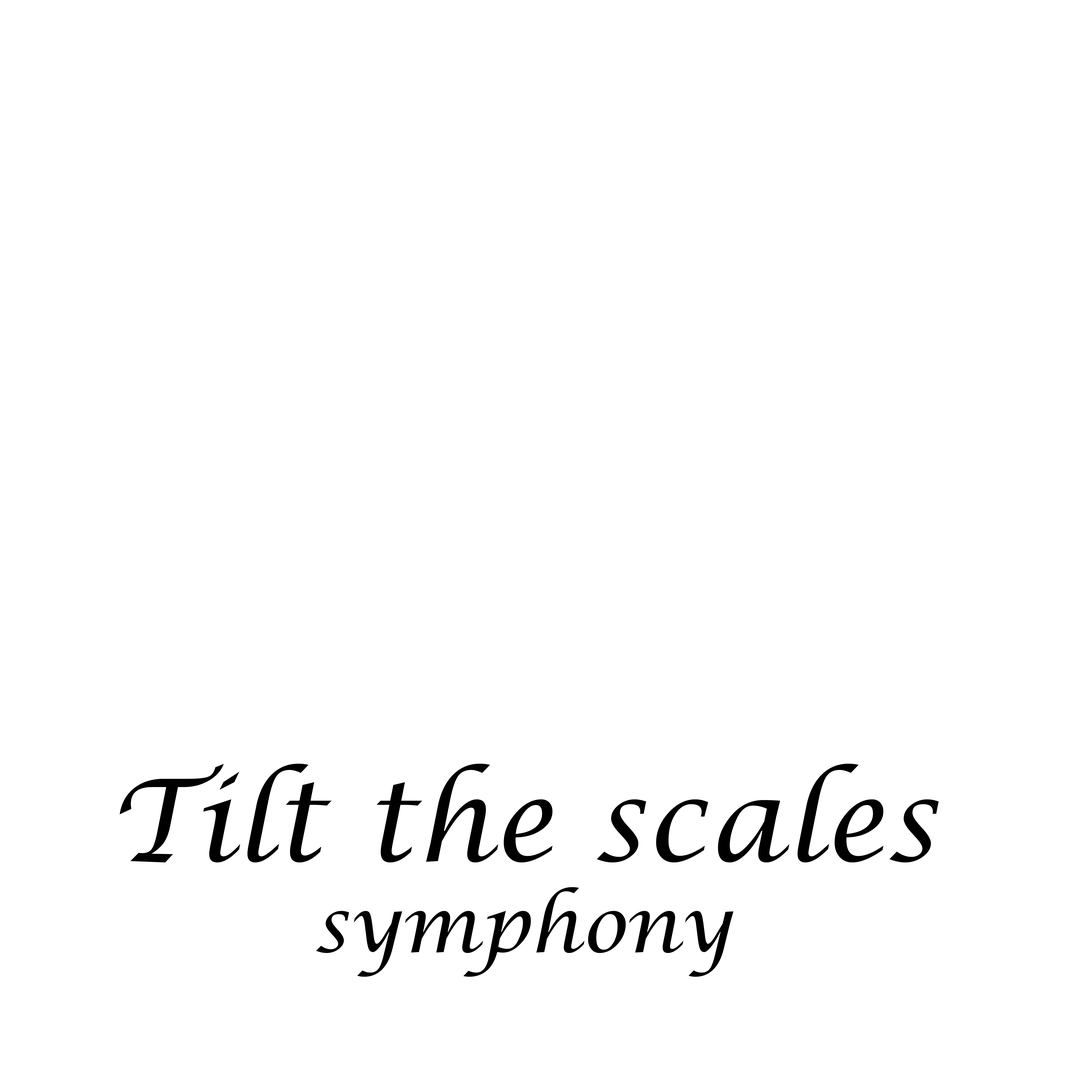
<style>
.page{position:relative;width:1092px;height:1092px;background:#ffffff}
.page>*{position:absolute;margin:0}
.t1{font:113.7px "LucidaCalligraphy-Italic";letter-spacing:0.005em;color:#000000}
.t2{font:75.8px "LucidaCalligraphy-Italic";letter-spacing:0.005em;color:#000000}
</style>
<div class="page">
<p class="t1" style="left:120px;top:764px;width:819px;height:213px;text-align:center">Tilt the scales<br><span class="t2">symphony</span></p>
</div>
